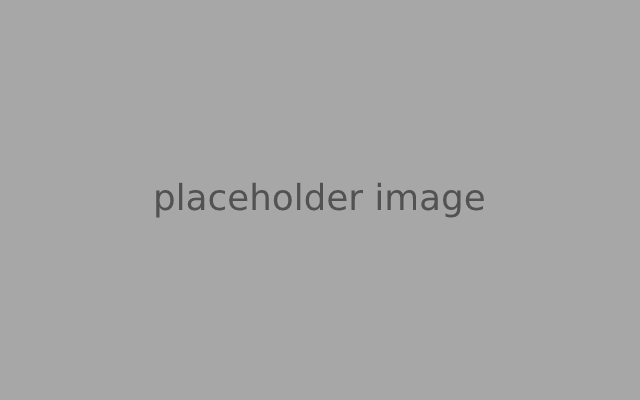
<style>
.page{position:relative;width:640px;height:400px;background:#a7a7a7}
.page>*{position:absolute;margin:0}
.t1{font:35.8px "DejaVuSans";color:#525252}
</style>
<div class="page">
<p class="t1" style="left:156px;top:182px;width:328px;height:36px">placeholder image</p>
</div>
